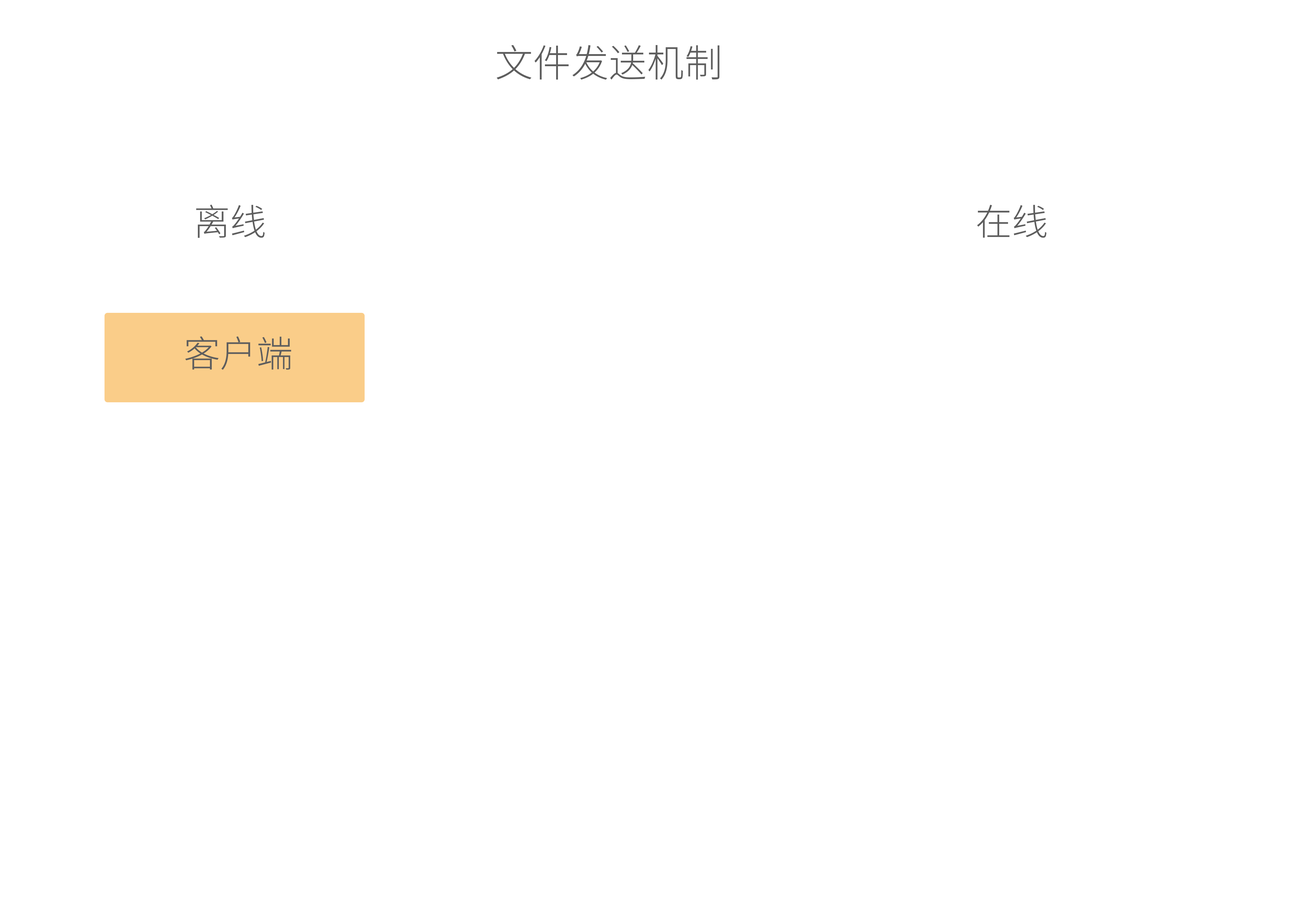
<style>
.page{position:relative;width:1305px;height:914px;background:#ffffff}
.page>*{position:absolute;margin:0}
.t1{font:37.9px "SourceHanSansCN-Light";color:#5e5e5e}
.t2{font:36.4px "SourceHanSansCN-Light";color:#5e5e5e}
</style>
<div class="page">
<p class="t1" style="left:497px;top:45px;width:223px;height:35px">文件发送机制</p>
<p class="t2" style="left:196px;top:204px;width:69px;height:34px">离线</p>
<p class="t2" style="left:977px;top:205px;width:70px;height:33px">在线</p>
<p class="t2" style="left:185px;top:336px;width:106px;height:34px">客户端</p>
</div>
